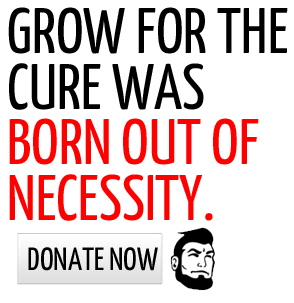
<style>
.page{position:relative;width:294px;height:303px;background:#ffffff}
.page>*{position:absolute;margin:0}
.t1{font:64.3px/55.5px "YanoneKaffeesatz-Regular";color:#ff0000}
.t2{font:64.3px/55.5px "YanoneKaffeesatz-Regular";color:#000000}
.t3{font:32.1px "YanoneKaffeesatz-Regular";color:#000000;text-transform:uppercase}
</style>
<div class="page">
<p class="t1" style="left:8px;top:7px;width:280px;height:214px"><span class="t2">GROW FOR THE<br>CURE WAS<br></span>BORN OUT OF<br>NECESSITY.</p>
<p class="t3" style="left:28px;top:247px;width:130px;height:24px">donate now</p>
</div>
